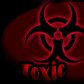
<style>
.page{position:relative;width:84px;height:84px;background:#000000}
.page>*{position:absolute;margin:0}
.t1{font:12px "Broadway"}
</style>
<div class="page">
<p class="t1" style="left:20px;top:61px;width:45px;height:21px;text-align:center">Toxic</p>
</div>
